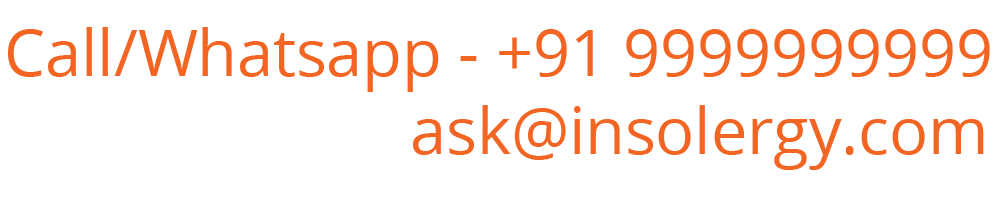
<style>
.page{position:relative;width:1000px;height:200px;background:#ffffff}
.page>*{position:absolute;margin:0}
.t1{font:64.6px "OpenSans";color:#f26522}
</style>
<div class="page">
<p class="t1" style="left:8px;top:27px;width:982px;height:143px">Call/Whatsapp - +91 9999999999<br>               ask@insolergy.com</p>
</div>
